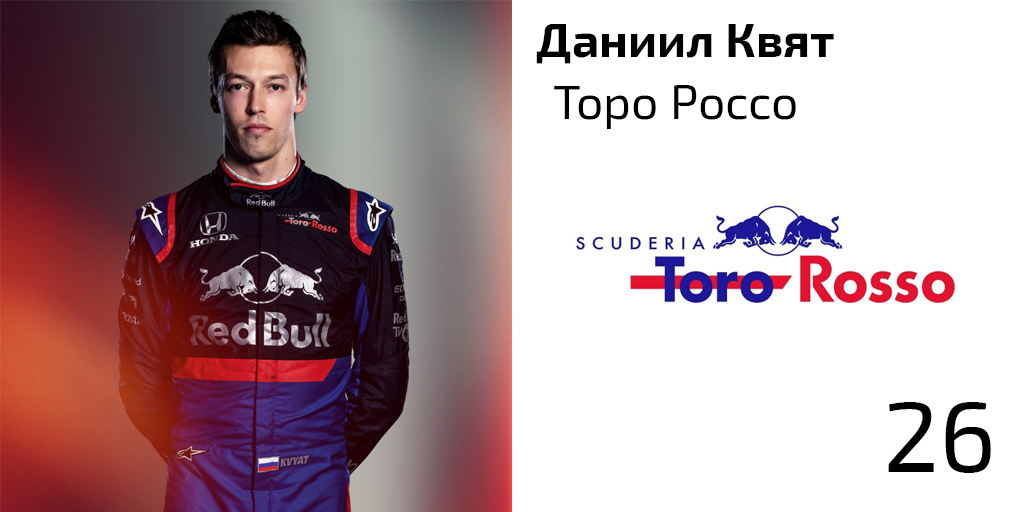
<style>
.page{position:relative;width:1024px;height:512px;background:#ffffff}
.page>*{position:absolute;margin:0}
.t1{font:48px "Exo2-Bold";color:#000000}
.t2{font:48px "Exo2-Regular";color:#000000}
.t3{font:100px "Exo2-Regular";color:#000000}
</style>
<div class="page">
<p class="t1" style="left:536px;top:24px;width:298px;height:40px">Даниил Квят</p>
<p class="t2" style="left:554px;top:85px;width:242px;height:44px">Торо Россо</p>
<p class="t3" style="left:888px;top:402px;width:103px;height:71px">26</p>
</div>
